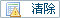
<style>
.page{position:relative;width:60px;height:18px;background:#ffffff}
.page>*{position:absolute;margin:0}
.t1{font:12px "SimSun";color:#00466e}
</style>
<div class="page">
<p class="t1" style="left:32px;top:3px;width:23px;height:11px">清除</p>
</div>
